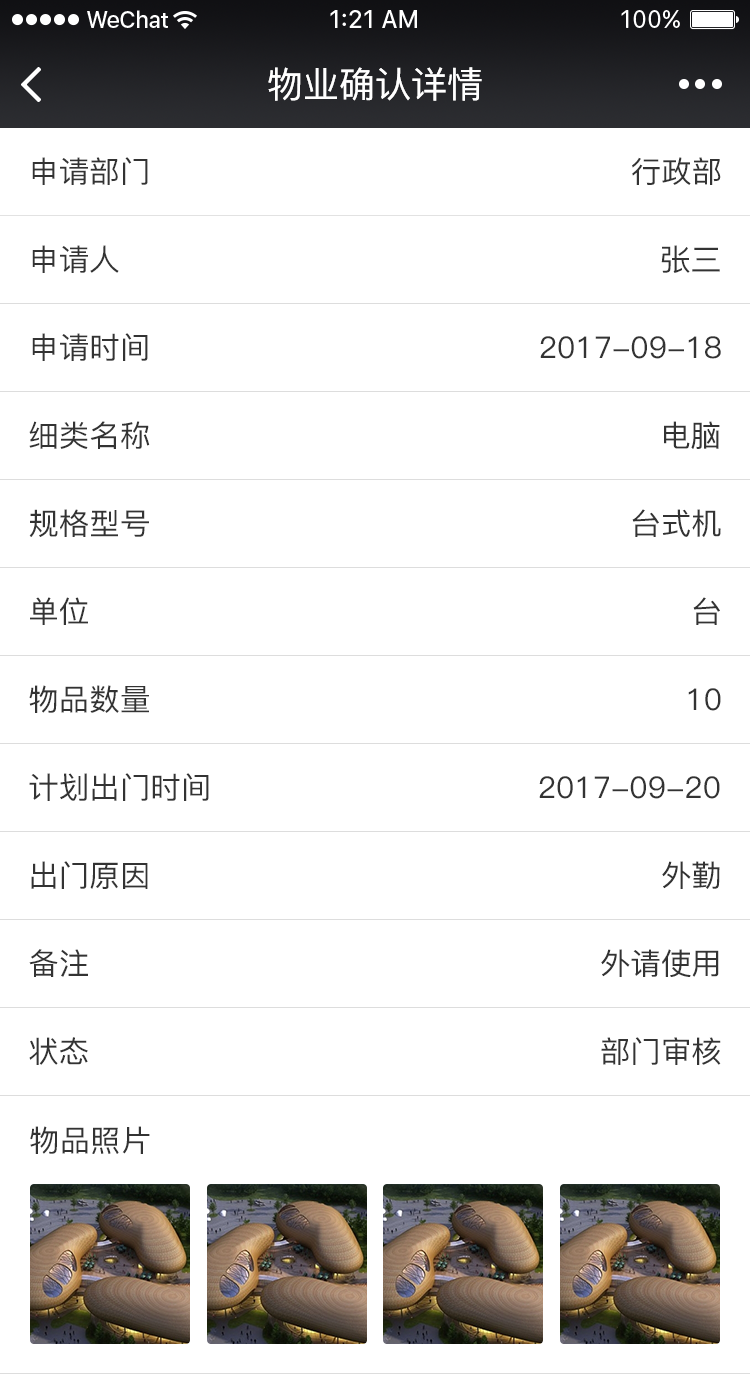
<style>
.page{position:relative;width:750px;height:1374px;background:#ffffff}
.page>*{position:absolute;margin:0}
.t1{font:36px "PingFang-SC-Medium";color:#ffffff}
.t2{font:30px "PingFang-SC-Medium";color:#333333}
.t3{font:29.9px "PingFang-SC-Medium";color:#333333}
</style>
<div class="page">
<p class="t1" style="left:268px;top:67px;width:214px;height:34px">物业确认详情</p>
<p class="t2" style="left:32px;top:157px;width:116px;height:28px">申请部门</p>
<p class="t2" style="left:632px;top:157px;width:89px;height:28px">行政部</p>
<p class="t2" style="left:32px;top:245px;width:87px;height:28px">申请人</p>
<p class="t2" style="left:661px;top:245px;width:59px;height:28px">张三</p>
<p class="t2" style="left:32px;top:333px;width:116px;height:28px">申请时间</p>
<p class="t2" style="left:540px;top:336px;width:181px;height:23px">2017-09-18</p>
<p class="t2" style="left:29px;top:421px;width:121px;height:28px">细类名称</p>
<p class="t2" style="left:664px;top:421px;width:56px;height:28px">电脑</p>
<p class="t2" style="left:29px;top:509px;width:120px;height:28px">规格型号</p>
<p class="t2" style="left:632px;top:509px;width:89px;height:28px">台式机</p>
<p class="t2" style="left:30px;top:597px;width:58px;height:28px">单位</p>
<p class="t2" style="left:693px;top:597px;width:27px;height:28px">台</p>
<p class="t2" style="left:29px;top:685px;width:120px;height:28px">物品数量</p>
<p class="t2" style="left:688px;top:688px;width:33px;height:23px">10</p>
<p class="t2" style="left:29px;top:773px;width:180px;height:28px">计划出门时间</p>
<p class="t2" style="left:539px;top:776px;width:181px;height:23px">2017-09-20</p>
<p class="t2" style="left:31px;top:861px;width:117px;height:28px">出门原因</p>
<p class="t2" style="left:662px;top:861px;width:58px;height:28px">外勤</p>
<p class="t2" style="left:29px;top:949px;width:59px;height:28px">备注</p>
<p class="t2" style="left:601px;top:949px;width:118px;height:28px">外请使用</p>
<p class="t2" style="left:29px;top:1037px;width:59px;height:28px">状态</p>
<p class="t2" style="left:601px;top:1037px;width:120px;height:28px">部门审核</p>
<p class="t3" style="left:30px;top:1126px;width:120px;height:28px">物品照片</p>
</div>
